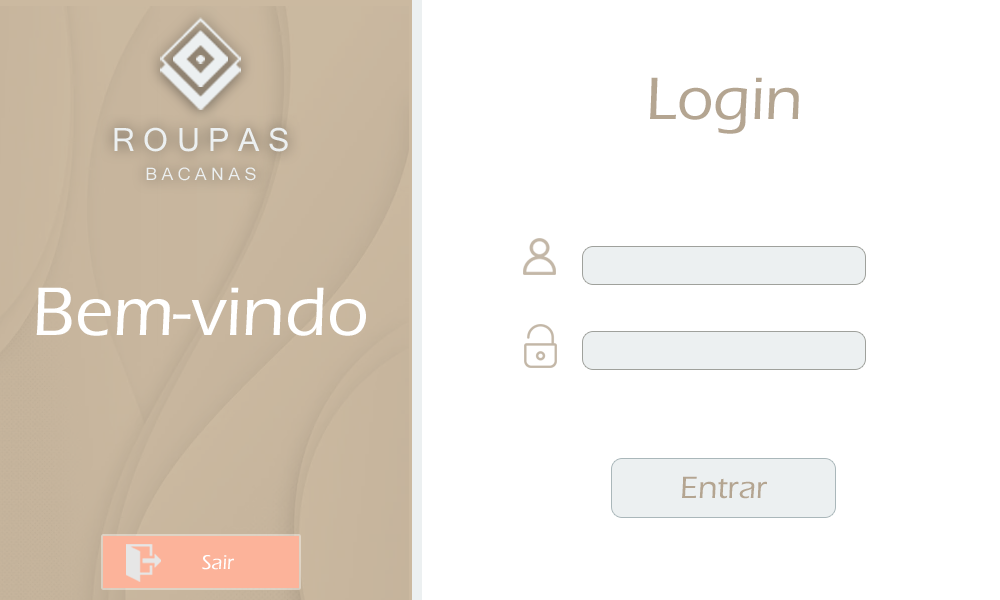
<style>
.page{position:relative;width:1000px;height:600px;background:#ffffff}
.page>*{position:absolute;margin:0}
.t1{font:62.1px "ErasITC-Medium";color:#b4a591}
.t2{font:32px "MicrosoftSansSerif";color:#ecf0f1}
.t3{font:17.3px "MicrosoftSansSerif";color:#ecf0f1}
.t4{font:71px "ErasITC-Medium";color:#ffffff}
.t5{font:32px "ErasITC-Medium";color:#b4a591}
.t6{font:20.4px "ErasITC-Medium";color:#ffffff}
</style>
<div class="page">
<p class="t1" style="left:650px;top:77px;width:149px;height:57px">Login</p>
<p class="t2" style="left:114px;top:127px;width:174px;height:25px">R O U P A S</p>
<p class="t3" style="left:146px;top:167px;width:110px;height:14px">B A C A N A S</p>
<p class="t4" style="left:36px;top:287px;width:330px;height:49px">Bem-vindo</p>
<p class="t5" style="left:682px;top:476px;width:85px;height:23px">Entrar</p>
<p class="t6" style="left:202px;top:555px;width:32px;height:15px">Sair</p>
</div>
